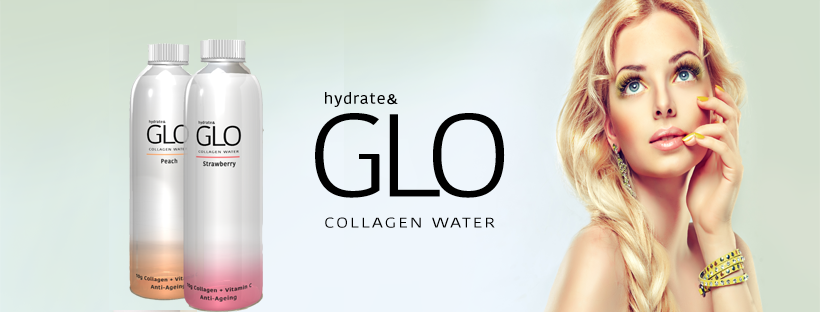
<style>
.page{position:relative;width:820px;height:312px}
.page>*{position:absolute;margin:0}
.t1{font:15.6px "KohinoorBangla-Medium";letter-spacing:0.05em;color:#000000;scale:1.05 1}
.t2{font:14.2px "KohinoorBangla-Semibold";letter-spacing:-0.1em;color:#000000;scale:1.06 1}
.t3{font:116.9px "KohinoorBangla-Light";letter-spacing:-0.1em;color:#000000;scale:1.14 1}
.t4{font:14px "KohinoorBangla-Regular";letter-spacing:0.1em;color:#000000;scale:1.32 1}
</style>
<div class="page">
<p class="t1" style="left:325px;top:92px;width:60px;height:15px">hydrate</p>
<p class="t2" style="left:387px;top:94px;width:11px;height:11px">&amp;</p>
<p class="t3" style="left:315px;top:113px;width:190px;height:85px">GLO</p>
<p class="t4" style="left:325px;top:217px;width:170px;height:11px">COLLAGEN WATER</p>
</div>
